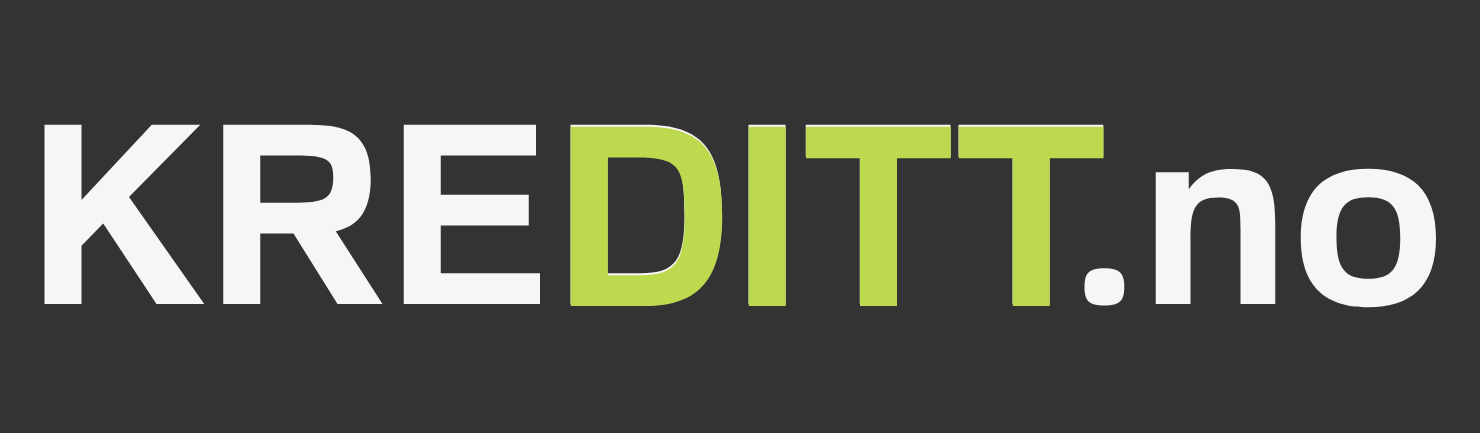
<style>
.page{position:relative;width:1480px;height:433px;background:#333333}
.page>*{position:absolute;margin:0}
.t1{font:250px "FamiliarPro-Bold";color:#f8f5f7}
.t2{font:250px "FamiliarPro-Bold";color:#bdd94d}
</style>
<div class="page">
<p class="t1" style="left:44px;top:124px;width:1392px;height:184px">KREDITT.no</p>
<p class="t2" style="left:570px;top:126px;width:534px;height:180px">DITT</p>
</div>
